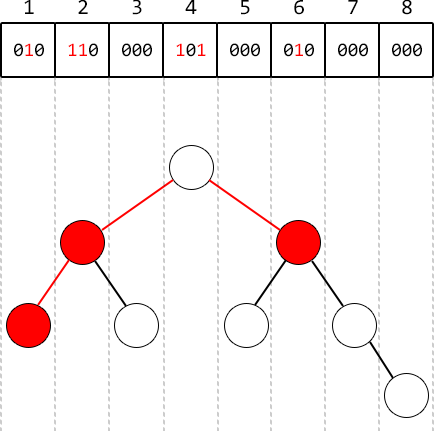
<style>
.page{position:relative;width:434px;height:431px;background:#ffffff}
.page>*{position:absolute;margin:0}
.t1{font:22px/42px "Consolas";color:#000000}
.t2{font:19px/42px "Consolas";color:#000000}
.t3{font:19px/42px "Consolas";color:#ff0000}
</style>
<div class="page">
<p class="t1" style="left:14px;top:0px;width:30px;height:57px;text-align:center">1<br><span class="t2">0</span><span class="t3">1</span><span class="t2">0</span></p>
<p class="t3" style="left:68px;top:0px;width:30px;height:57px;text-align:center"><span class="t1">2<br></span>11<span class="t2">0</span></p>
<p class="t2" style="left:122px;top:0px;width:30px;height:57px;text-align:center"><span class="t1">3<br></span>000</p>
<p class="t1" style="left:176px;top:0px;width:30px;height:57px;text-align:center">4<br><span class="t3">1</span><span class="t2">0</span><span class="t3">1</span></p>
<p class="t2" style="left:230px;top:0px;width:30px;height:57px;text-align:center"><span class="t1">5<br></span>000</p>
<p class="t1" style="left:284px;top:0px;width:30px;height:57px;text-align:center">6<br><span class="t2">0</span><span class="t3">1</span><span class="t2">0</span></p>
<p class="t2" style="left:338px;top:0px;width:30px;height:57px;text-align:center"><span class="t1">7<br></span>000</p>
<p class="t2" style="left:392px;top:0px;width:30px;height:57px;text-align:center"><span class="t1">8<br></span>000</p>
</div>
